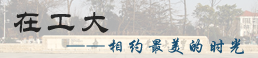
<style>
.page{position:relative;width:258px;height:58px}
.page>*{position:absolute;margin:0}
.t1{font:52.2px "STLiti";letter-spacing:0.1em;color:#242423;font-variant:small-caps}
.t2{font:31.3px "STXingkai";letter-spacing:0.1em;color:#194f73;font-variant:small-caps}
</style>
<div class="page">
<p class="t1" style="left:14px;top:11px;width:95px;height:22px">在工大</p>
<p class="t2" style="left:66px;top:37px;width:178px;height:18px">——相约最美的时光</p>
</div>
